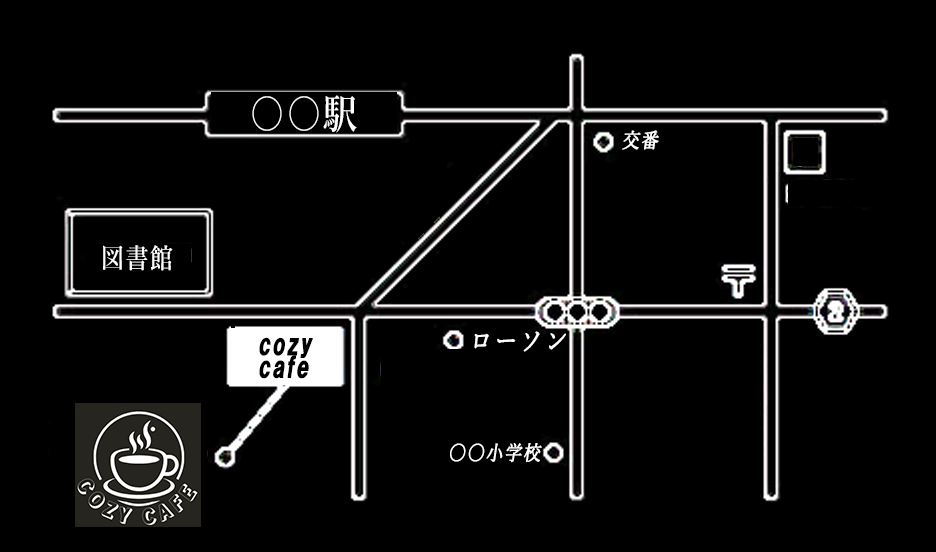
<style>
.page{position:relative;width:936px;height:552px;background:#000000}
.page>*{position:absolute;margin:0}
.t1{font:40.9px "YuMincho-Demibold";letter-spacing:0.075em;color:#ffffff;scale:0.83 1}
.t2{font:20.4px "YuMincho-Regular";letter-spacing:0.075em;color:#ffffff;font-weight:bold;font-style:italic;scale:0.83 1}
.t3{font:27.2px "YuMincho-Demibold";letter-spacing:0.075em;color:#ffffff;scale:0.83 1}
.t4{font:27.2px/22.7px "HGSSoeiKakugothicUB";letter-spacing:0.075em;color:#000000;font-weight:bold;font-style:italic;scale:0.83 1}
.t5{font:27.2px "YuMincho-Regular";letter-spacing:0.075em;color:#ffffff;font-weight:bold;font-style:italic;scale:0.83 1}
</style>
<div class="page">
<p class="t1" style="left:252px;top:95px;width:105px;height:38px">○○駅</p>
<p class="t2" style="left:622px;top:130px;width:37px;height:20px">交番</p>
<p class="t3" style="left:103px;top:245px;width:70px;height:26px">図書館</p>
<p class="t4" style="left:259px;top:337px;width:54px;height:42px">cozy <br>cafe</p>
<p class="t5" style="left:474px;top:331px;width:92px;height:21px">ローソン</p>
<p class="t2" style="left:450px;top:443px;width:92px;height:20px">○○小学校</p>
</div>
